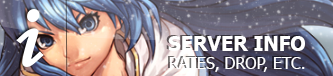
<style>
.page{position:relative;width:333px;height:76px}
.page>*{position:absolute;margin:0}
.t1{font:20px "Tahoma-Bold";color:#ffffff}
.t2{font:16px "Tahoma";color:#ffffff}
</style>
<div class="page">
<p class="t1" style="left:168px;top:36px;width:137px;height:15px">SERVER INFO</p>
<p class="t2" style="left:170px;top:57px;width:135px;height:15px">RATES, DROP, ETC.</p>
</div>
